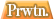
<style>
.page{position:relative;width:54px;height:19px}
.page>*{position:absolute;margin:0}
.t1{font:16px "RyuminPro-ExBold";letter-spacing:-0.08em;color:#ffffff;scale:0.9 1}
</style>
<div class="page">
<p class="t1" style="left:7px;top:4px;width:41px;height:12px">Prwtn.</p>
</div>
